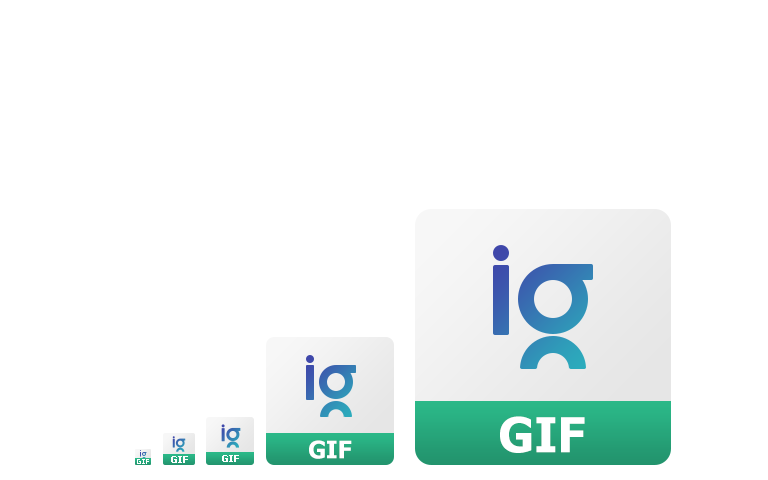
<style>
.page{position:relative;width:768px;height:480px;background:#ffffff}
.page>*{position:absolute;margin:0}
.t1{font:48px "Tahoma-Bold";color:#ffffff}
.t2{font:24px "Tahoma-Bold";color:#ffffff}
.t3{font:10px "Tahoma-Bold";color:#ffffff}
</style>
<div class="page">
<p class="t1" style="left:500px;top:416px;width:85px;height:37px">GIF</p>
<p class="t2" style="left:309px;top:440px;width:43px;height:19px">GIF</p>
<p class="t3" style="left:171px;top:456px;width:17px;height:7px">GIF</p>
<p class="t3" style="left:222px;top:455px;width:17px;height:7px">GIF</p>
</div>
